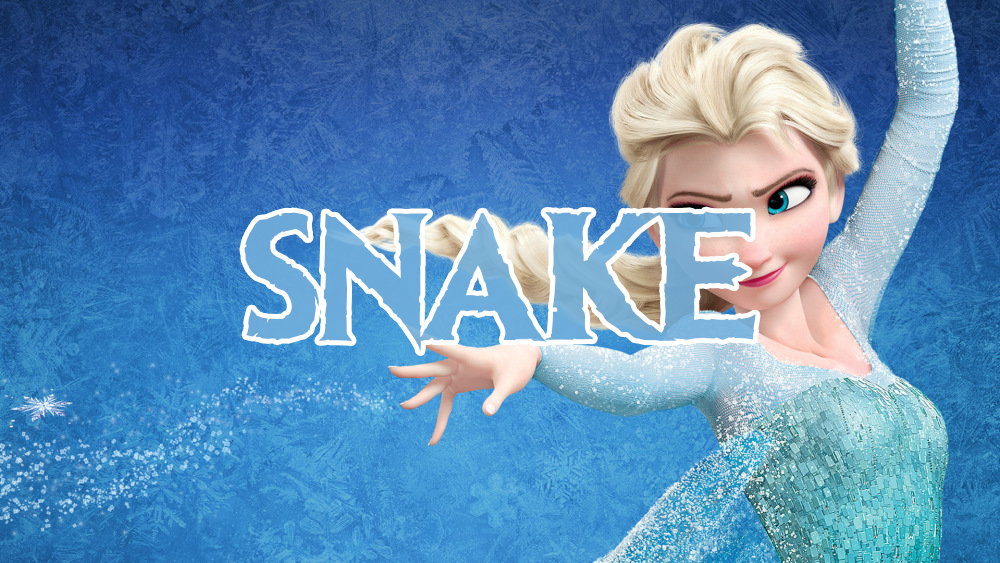
<style>
.page{position:relative;width:1000px;height:563px}
.page>*{position:absolute;margin:0}
.t1{font:200px "Icekingdom-Bold";color:#6eacd9}
</style>
<div class="page">
<p class="t1" style="left:244px;top:211px;width:512px;height:141px">snake</p>
</div>
